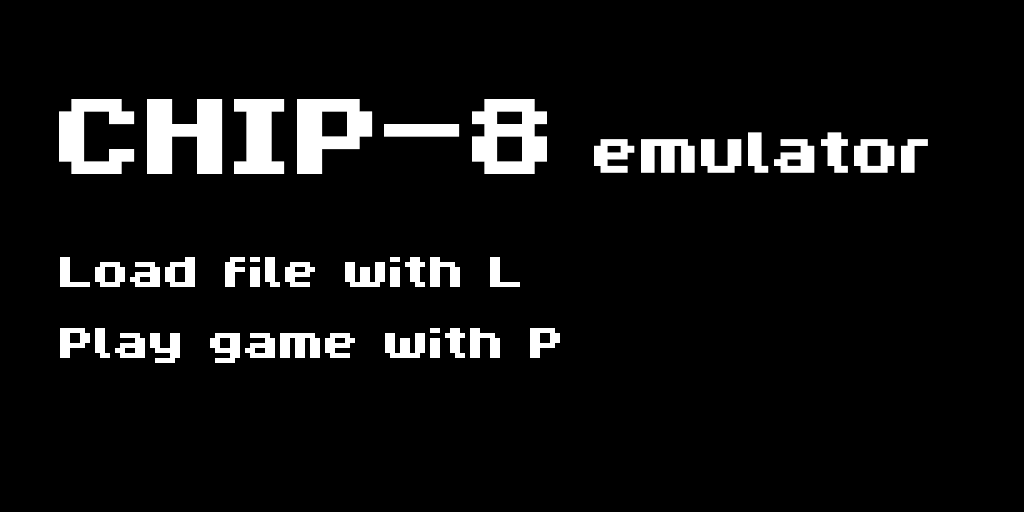
<style>
.page{position:relative;width:1024px;height:512px;background:#000000}
.page>*{position:absolute;margin:0}
.t1{font:200px "ByteBounce";color:#ffffff}
.t2{font:106.7px "ByteBounce";color:#ffffff}
.t3{font:80px "ByteBounce";color:#ffffff}
</style>
<div class="page">
<p class="t1" style="left:59px;top:99px;width:488px;height:75px">CHIP-8</p>
<p class="t2" style="left:594px;top:132px;width:334px;height:41px">emulator</p>
<p class="t3" style="left:60px;top:257px;width:460px;height:30px">Load file with L</p>
<p class="t3" style="left:60px;top:328px;width:500px;height:35px">Play game with P</p>
</div>
